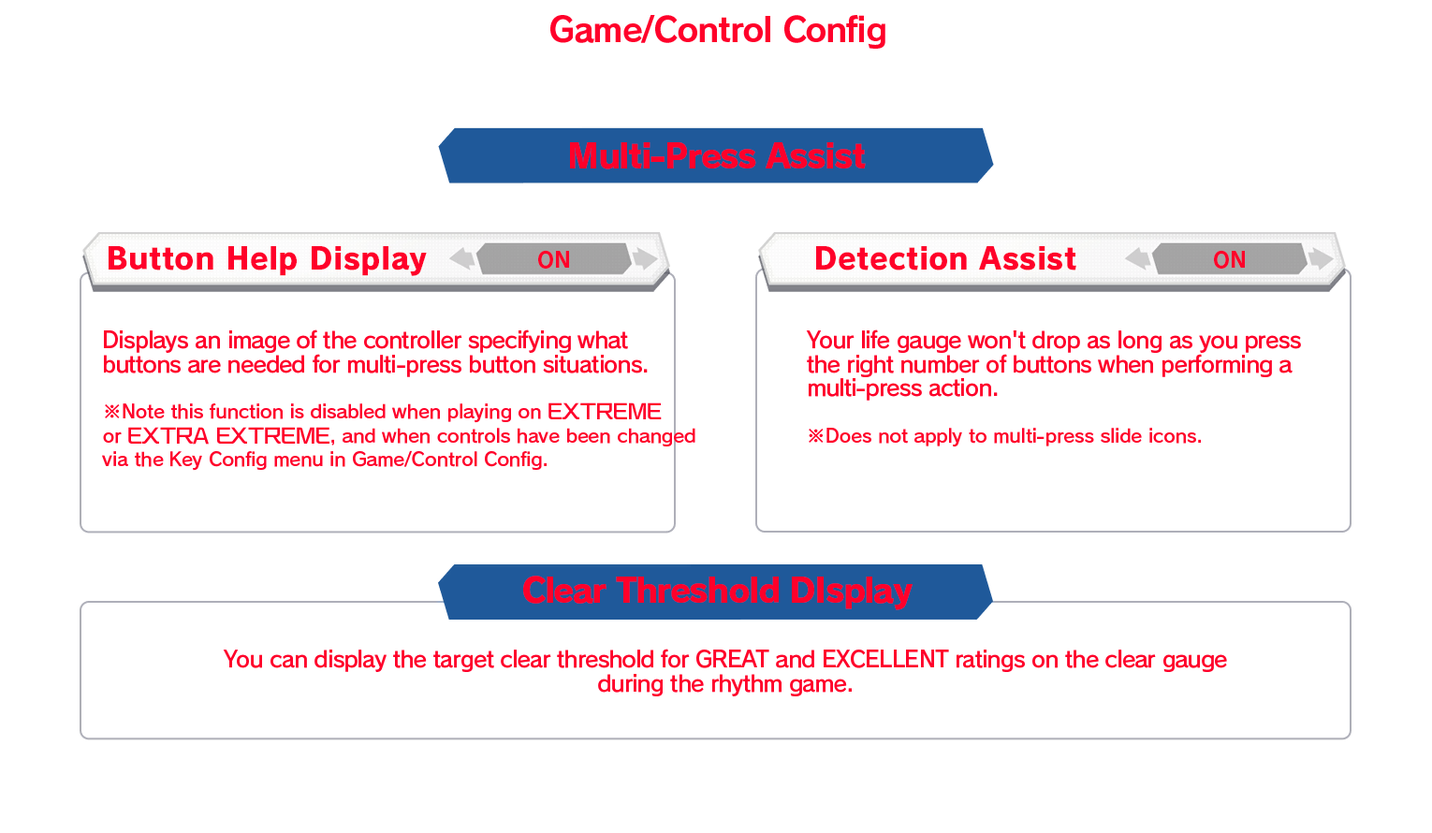
<style>
.page{position:relative;width:1432px;height:833px;background:#ffffff}
.page>*{position:absolute;margin:0}
.t1{font:33.7px "RodinPro-B";letter-spacing:-0.039em;color:#ff002a}
.t2{font:33.7px "RodinPro-EB";letter-spacing:-0.048em;color:#ff002a}
.t3{font:29.9px "RodinPro-EB";letter-spacing:0.007em;color:#ff002a}
.t4{font:21.2px "RodinPro-B";color:#ff002a}
.t5{font:22.5px/23.7px "RodinPro-DB";letter-spacing:-0.04em;color:#ff002a}
.t6{font:18.7px/23.7px "RodinPro-DB";letter-spacing:-0.014em;color:#ff002a}
.t7{font:18.7px/23.7px "KafuTechnoStd-E";letter-spacing:-0.014em;color:#ff002a}
.t8{font:18.7px "RodinPro-DB";letter-spacing:-0.014em;color:#ff002a}
</style>
<div class="page">
<p class="t1" style="left:550px;top:15px;width:335px;height:34px">Game/Control Config</p>
<p class="t2" style="left:570px;top:142px;width:296px;height:27px">Multi-Press Assist</p>
<p class="t3" style="left:109px;top:246px;width:318px;height:30px">Button Help Display</p>
<p class="t4" style="left:538px;top:250px;width:31px;height:19px">ON</p>
<p class="t3" style="left:816px;top:246px;width:260px;height:24px">Detection Assist</p>
<p class="t4" style="left:1214px;top:250px;width:31px;height:19px">ON</p>
<p class="t5" style="left:104px;top:329px;width:544px;height:48px">Displays an image of the controller specifying what<br>buttons are needed for multi-press button situations.</p>
<p class="t5" style="left:806px;top:329px;width:495px;height:72px">Your life gauge won't drop as long as you press<br>the right number of buttons when performing a<br>multi-press action.</p>
<p class="t6" style="left:102px;top:402px;width:593px;height:69px">※Note this function is disabled when playing on <span class="t7">EXTREME<br></span>or <span class="t7">EXTRA EXTREME</span>, and when controls have been changed<br>via the Key Config menu in Game/Control Config.</p>
<p class="t8" style="left:809px;top:428px;width:392px;height:19px">※Does not apply to multi-press slide icons.</p>
<p class="t2" style="left:523px;top:576px;width:389px;height:34px">Clear Threshold DIsplay</p>
<p class="t5" style="left:223px;top:648px;width:1004px;height:48px;text-align:center">You can display the target clear threshold for GREAT and EXCELLENT ratings on the clear gauge<br>during the rhythm game.</p>
</div>
